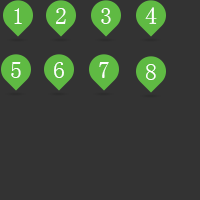
<style>
.page{position:relative;width:200px;height:200px;background:#333333}
.page>*{position:absolute;margin:0}
.t1{font:24px "SimSun";color:#ffffff;text-transform:uppercase}
</style>
<div class="page">
<p class="t1" style="left:14px;top:8px;width:8px;height:16px">1</p>
<p class="t1" style="left:56px;top:8px;width:10px;height:16px">2</p>
<p class="t1" style="left:101px;top:8px;width:10px;height:16px">3</p>
<p class="t1" style="left:145px;top:7px;width:12px;height:17px">4</p>
<p class="t1" style="left:11px;top:62px;width:10px;height:16px">5</p>
<p class="t1" style="left:54px;top:62px;width:10px;height:16px">6</p>
<p class="t1" style="left:99px;top:62px;width:10px;height:16px">7</p>
<p class="t1" style="left:146px;top:64px;width:10px;height:16px">8</p>
</div>
